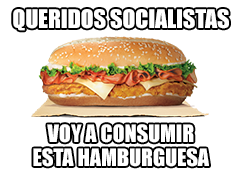
<style>
.page{position:relative;width:240px;height:174px;background:#ffffff}
.page>*{position:absolute;margin:0}
.t1{font:23.7px "Impact";color:#ffffff}
.t2{font:22.1px "Impact";color:#ffffff}
</style>
<div class="page">
<p class="t1" style="left:13px;top:9px;width:216px;height:22px">QUERIDOS SOCIALISTAS</p>
<p class="t2" style="left:33px;top:124px;width:176px;height:43px;text-align:center">VOY A CONSUMIR<br>ESTA HAMBURGUESA</p>
</div>
